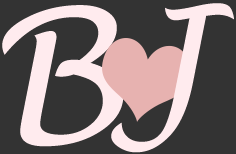
<style>
.page{position:relative;width:236px;height:154px;background:#333333}
.page>*{position:absolute;margin:0}
.t1{font:180px "LucidaHandwriting-Italic";letter-spacing:-0.01em;color:#ffebee}
.t2{font:156px "LucidaHandwriting-Italic";color:#ffebee}
</style>
<div class="page">
<p class="t1" style="left:2px;top:5px;width:122px;height:142px">B</p>
<p class="t2" style="left:111px;top:3px;width:123px;height:150px">J</p>
</div>
